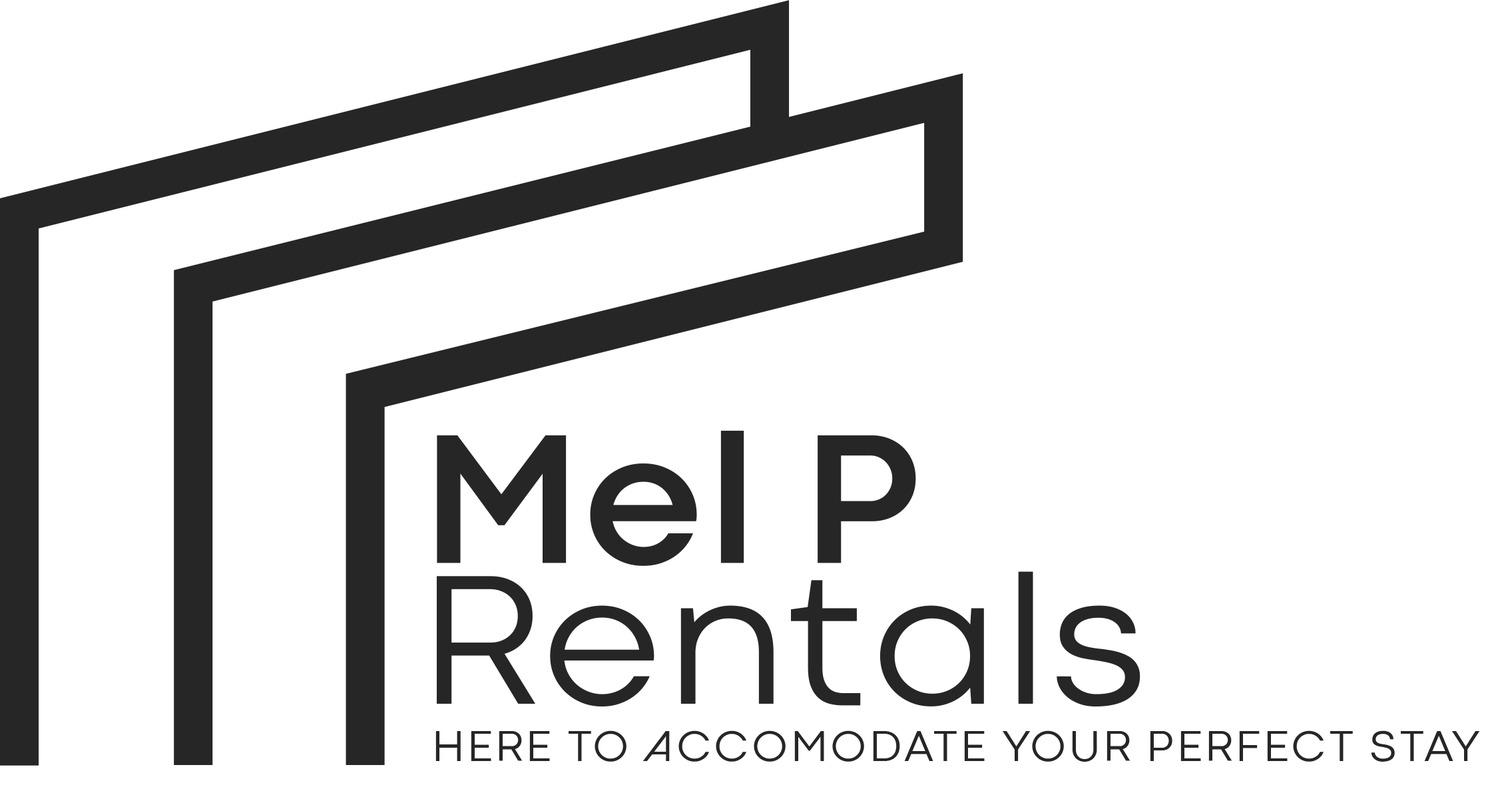
<style>
.page{position:relative;width:1496px;height:797px;background:#ffffff}
.page>*{position:absolute;margin:0}
.t1{font:44.5px "CodecColdTrial-News";letter-spacing:0.066em;color:#262626}
</style>
<div class="page">
<p class="t1" style="left:435px;top:730px;width:1045px;height:32px">HERE TO ACCOMODATE YOUR PERFECT STAY</p>
</div>
